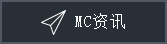
<style>
.page{position:relative;width:167px;height:44px;background:#292f37}
.page>*{position:absolute;margin:0}
.t1{font:16px "NSimSun";letter-spacing:0.05em;color:#ffffff}
</style>
<div class="page">
<p class="t1" style="left:75px;top:13px;width:50px;height:16px">MC资讯</p>
</div>
